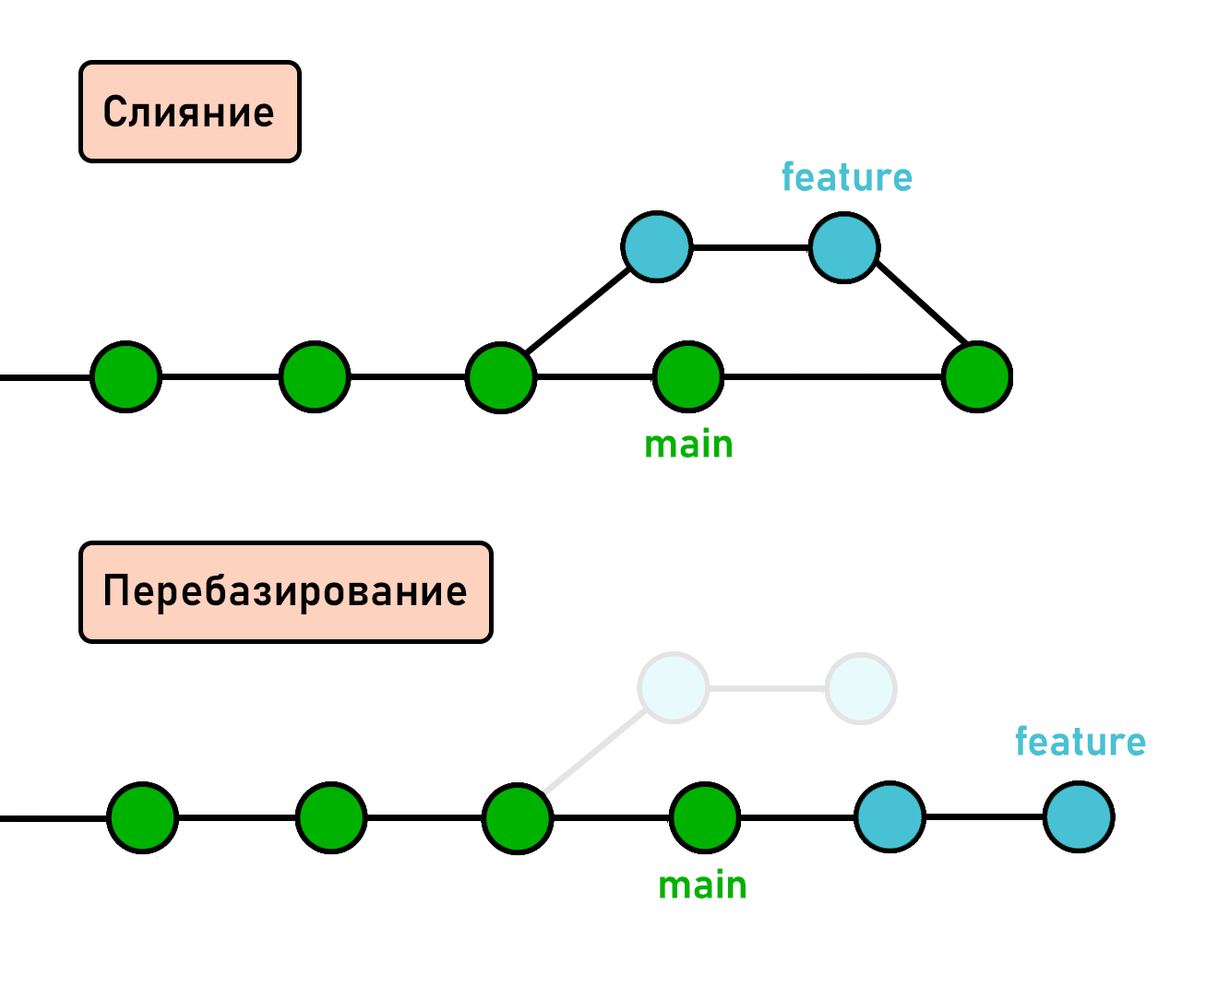
<style>
.page{position:relative;width:1206px;height:988px;background:#ffffff}
.page>*{position:absolute;margin:0}
.t1{font:44.3px "Bahnschrift-SemiBold";color:#000000}
.t2{font:41.5px "Bahnschrift-SemiBold";color:#47c1d3}
.t3{font:41.5px "Bahnschrift-SemiBold";color:#00b200}
</style>
<div class="page">
<p class="t1" style="left:104px;top:94px;width:170px;height:33px">Слияние</p>
<p class="t2" style="left:782px;top:161px;width:131px;height:30px">feature</p>
<p class="t3" style="left:646px;top:427px;width:86px;height:31px">main</p>
<p class="t1" style="left:105px;top:574px;width:362px;height:41px">Перебазирование</p>
<p class="t2" style="left:1015px;top:725px;width:131px;height:31px">feature</p>
<p class="t3" style="left:660px;top:869px;width:86px;height:30px">main</p>
</div>
